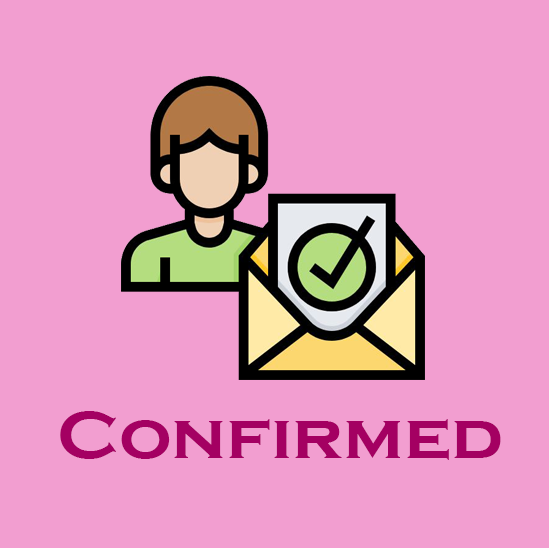
<style>
.page{position:relative;width:549px;height:549px;background:#f29ed0}
.page>*{position:absolute;margin:0}
.t1{font:69.3px "CopperplateGothic-Bold";color:#a40062;scale:1.06 1}
</style>
<div class="page">
<p class="t1" style="left:60px;top:411px;width:441px;height:49px">Confirmed</p>
</div>
